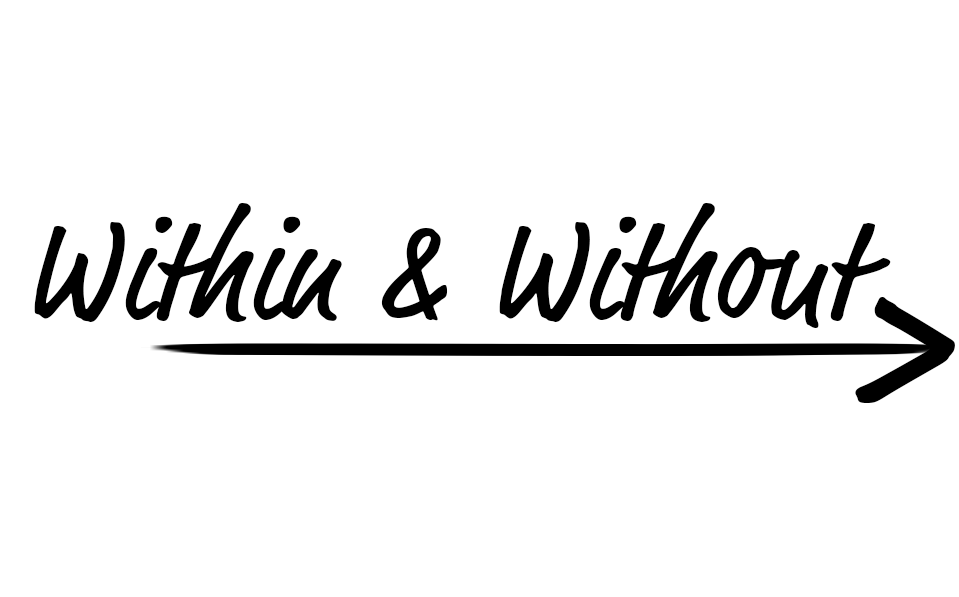
<style>
.page{position:relative;width:959px;height:597px;background:#ffffff}
.page>*{position:absolute;margin:0}
.t1{font:144px "MarketOT";color:#000000}
.t2{font:238px "MarketOT";color:#000000}
</style>
<div class="page">
<p class="t1" style="left:34px;top:203px;width:857px;height:125px">Within &amp; Without</p>
<p class="t2" style="left:855px;top:297px;width:100px;height:106px">&gt;</p>
</div>
